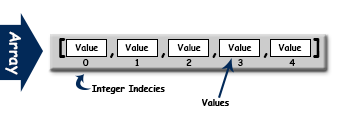
<style>
.page{position:relative;width:350px;height:113px;background:#ffffff}
.page>*{position:absolute;margin:0}
.t1{font:15.7px "ComicSansMS-Bold";color:#fffefe}
.t2{font:20.9px "ComicSansMS-Bold";letter-spacing:-0.025em;color:#000000}
.t3{font:9.4px "ComicSansMS-Bold";letter-spacing:-0.025em;color:#000000}
</style>
<div class="page">
<p class="t1" style="left:5px;top:31px;width:16px;height:44px;rotate:90deg">Array</p>
<p class="t2" style="left:59px;top:38px;width:261px;height:20px">[     ,     ,     ,     ,     ]</p>
<p class="t3" style="left:75px;top:44px;width:24px;height:7px">Value</p>
<p class="t3" style="left:125px;top:44px;width:24px;height:7px">Value</p>
<p class="t3" style="left:177px;top:44px;width:24px;height:7px">Value</p>
<p class="t3" style="left:228px;top:44px;width:24px;height:7px">Value</p>
<p class="t3" style="left:278px;top:44px;width:24px;height:7px">Value</p>
<p class="t3" style="left:83px;top:59px;width:212px;height:7px">0            1            2            3            4</p>
<p class="t3" style="left:92px;top:85px;width:73px;height:9px">Integer Indecies</p>
<p class="t3" style="left:202px;top:99px;width:27px;height:7px">Values</p>
</div>
